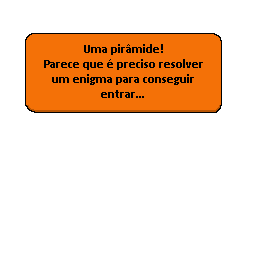
<style>
.page{position:relative;width:256px;height:256px;background:#ffffff}
.page>*{position:absolute;margin:0}
.t1{font:12.5px "Calibri-Bold";color:#000000}
</style>
<div class="page">
<p class="t1" style="left:44px;top:44px;width:159px;height:54px;text-align:center">Uma pirâmide!<br>Parece que é preciso resolver<br>um enigma para conseguir<br>entrar...</p>
</div>
